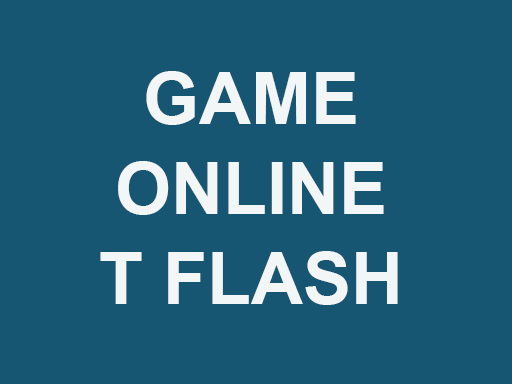
<style>
.page{position:relative;width:512px;height:384px;background:#175672}
.page>*{position:absolute;margin:0}
.t1{font:72px/90px "Arial-BoldMT";color:#f3f6f7}
</style>
<div class="page">
<p class="t1" style="left:100px;top:71px;width:298px;height:234px;text-align:center">GAME ONLINE<br>T FLASH</p>
</div>
